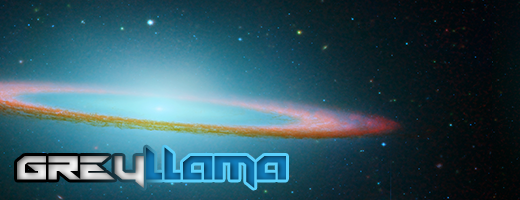
<style>
.page{position:relative;width:520px;height:200px}
.page>*{position:absolute;margin:0}
.t1{font:67.8px "Fatality's-Edge";scale:1.24 1}
</style>
<div class="page">
<p class="t1" style="left:17px;top:147px;width:269px;height:41px">GreyLLama</p>
</div>
